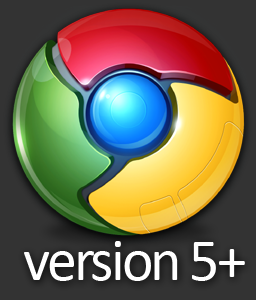
<style>
.page{position:relative;width:256px;height:300px;background:#333333}
.page>*{position:absolute;margin:0}
.t1{font:60px "Calibri";letter-spacing:-0.05em;color:#ffffff}
</style>
<div class="page">
<p class="t1" style="left:24px;top:241px;width:221px;height:40px">version 5+</p>
</div>
